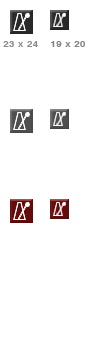
<style>
.page{position:relative;width:100px;height:350px;background:#ffffff}
.page>*{position:absolute;margin:0}
.t1{font:8.8px "Helvetica-Bold";letter-spacing:0.05em;color:#8f8c8c;scale:1.09 1}
.t2{font:8.8px "Helvetica-Bold";letter-spacing:0.05em;color:#848282;scale:1.09 1}
</style>
<div class="page">
<p class="t1" style="left:3px;top:41px;width:35px;height:6px">23 x 24</p>
<p class="t2" style="left:51px;top:41px;width:34px;height:6px">19 x 20</p>
</div>
